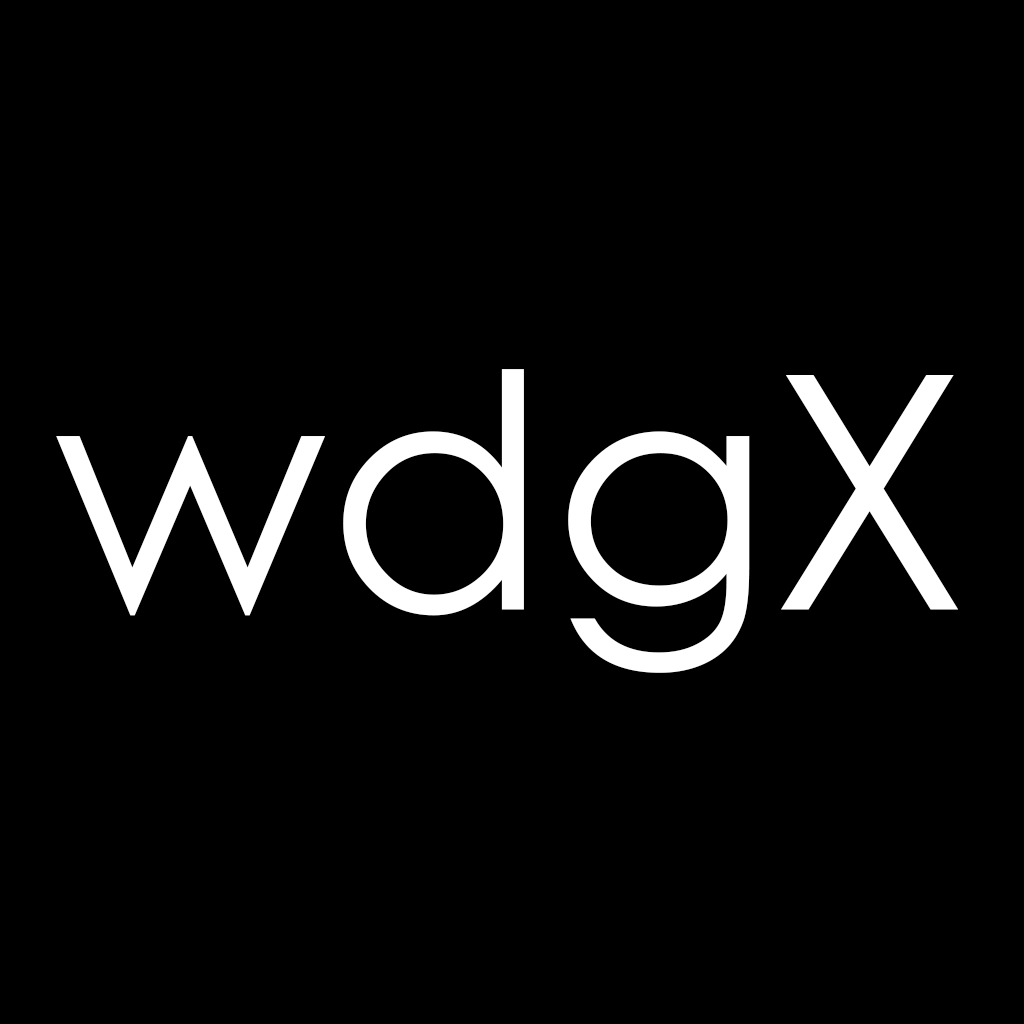
<style>
.page{position:relative;width:1024px;height:1024px;background:#000000}
.page>*{position:absolute;margin:0}
.t1{font:326.4px "STHeiti";color:#ffffff}
</style>
<div class="page">
<p class="t1" style="left:56px;top:369px;width:903px;height:304px">wdgX</p>
</div>
